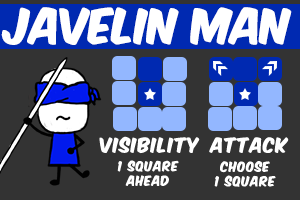
<style>
.page{position:relative;width:300px;height:200px;background:#333333}
.page>*{position:absolute;margin:0}
.t1{font:41.7px "KomikaAxis";color:#ffffff}
.t2{font:17.3px "KomikaAxis";letter-spacing:0.06em;color:#ffffff}
.t3{font:11.7px/7px "KomikaAxis";letter-spacing:0.06em;color:#ffffff}
</style>
<div class="page">
<p class="t1" style="left:1px;top:7px;width:291px;height:38px">javelin man</p>
<p class="t2" style="left:99px;top:136px;width:101px;height:18px">visibility</p>
<p class="t2" style="left:209px;top:137px;width:80px;height:16px">attack</p>
<p class="t3" style="left:117px;top:160px;width:62px;height:26px;text-align:center">1 square<br>ahead</p>
<p class="t3" style="left:214px;top:161px;width:62px;height:26px;text-align:center">choose<br>1 square</p>
</div>
